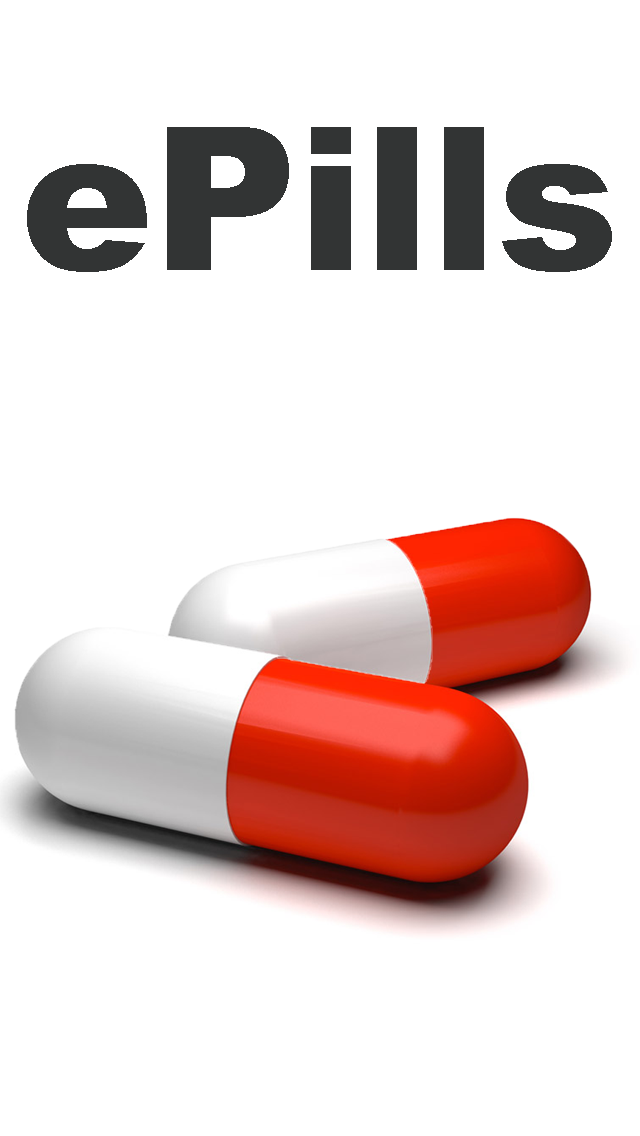
<style>
.page{position:relative;width:640px;height:1136px;background:#ffffff}
.page>*{position:absolute;margin:0}
.t1{font:200px "Arial-Black";color:#323434}
</style>
<div class="page">
<p class="t1" style="left:27px;top:127px;width:585px;height:145px">ePills</p>
</div>
